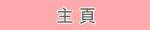
<style>
.page{position:relative;width:150px;height:30px;background:#ffaaad}
.page>*{position:absolute;margin:0}
.t1{font:18px "MS-PGothic";letter-spacing:-0.025em;color:#666666}
</style>
<div class="page">
<p class="t1" style="left:57px;top:7px;width:38px;height:17px">主 頁</p>
</div>
